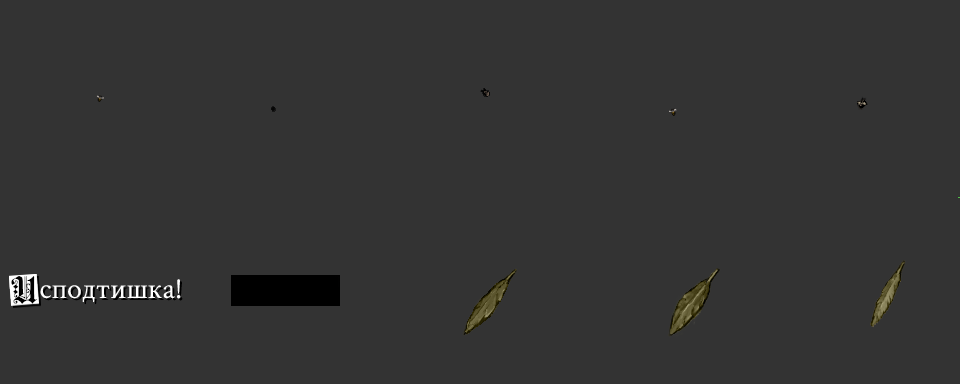
<style>
.page{position:relative;width:960px;height:384px;background:#333333}
.page>*{position:absolute;margin:0}
.t1{font:36px "FortunaGothicFlorishC";color:#000000}
.t2{font:30px "CrimsonText-Regular";color:#ffffff}
</style>
<div class="page">
<p class="t1" style="left:11px;top:276px;width:27px;height:28px">И</p>
<p class="t2" style="left:40px;top:279px;width:141px;height:24px">сподтишка!</p>
</div>
